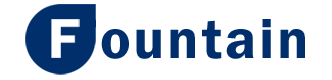
<style>
.page{position:relative;width:332px;height:80px;background:#ffffff}
.page>*{position:absolute;margin:0}
.t1{font:57.6px "FranklinGothic-Demi";letter-spacing:0.05em;color:#002f6c}
</style>
<div class="page">
<p class="t1" style="left:68px;top:19px;width:237px;height:40px">Fountain</p>
</div>
